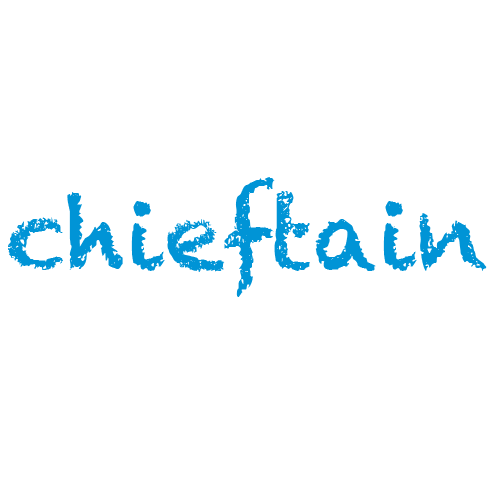
<style>
.page{position:relative;width:495px;height:495px;background:#ffffff}
.page>*{position:absolute;margin:0}
.t1{font:96px "Chalkduster";color:#0094d6}
</style>
<div class="page">
<p class="t1" style="left:8px;top:177px;width:479px;height:120px">chieftain</p>
</div>
